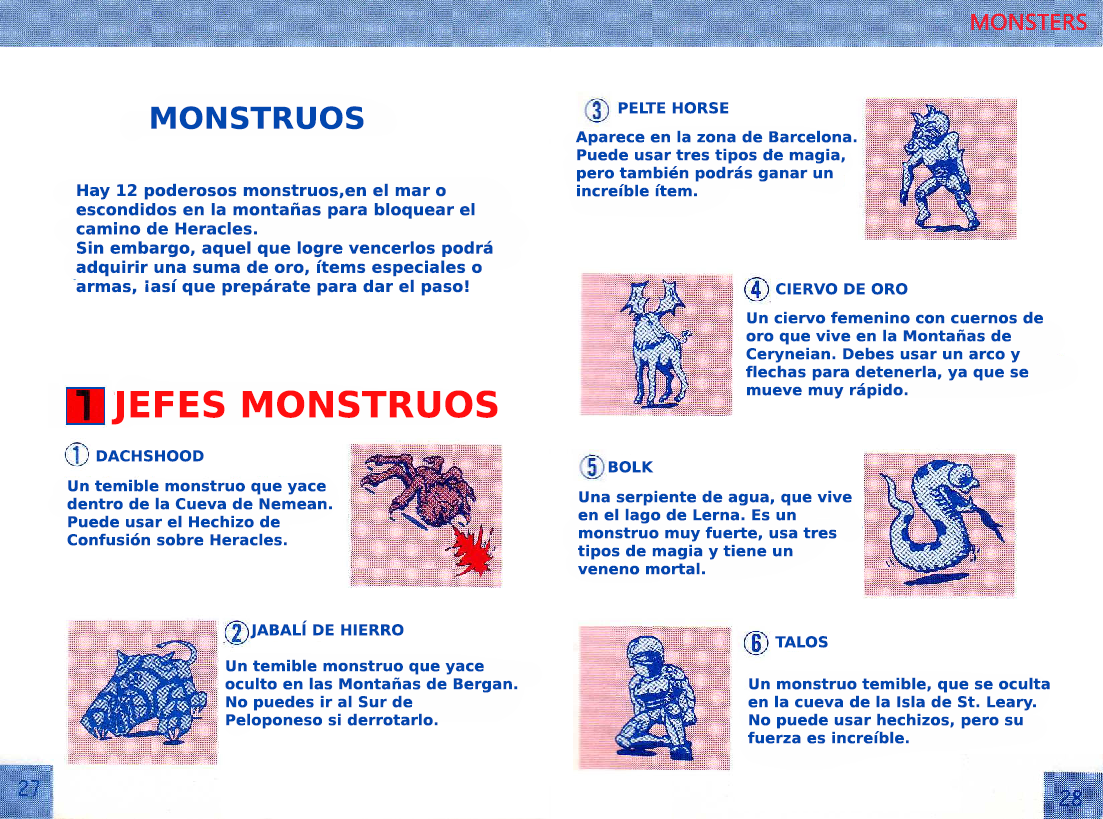
<style>
.page{position:relative;width:1103px;height:819px;background:#ffffff}
.page>*{position:absolute;margin:0}
.t1{font:15px "PrimaSansBT-Bold";color:#0247af}
.t2{font:30px "PrimaSansBT-Bold";color:#0247af}
.t3{font:16px "PrimaSansBT-Bold";color:#0247af}
.t4{font:36px "PrimaSansBT-Bold";color:#ff0e0f}
</style>
<div class="page">
<p class="t1" style="left:618px;top:102px;width:111px;height:12px">PELTE HORSE</p>
<p class="t2" style="left:151px;top:106px;width:213px;height:24px">MONSTRUOS</p>
<p class="t1" style="left:575px;top:130px;width:282px;height:67px">Aparece en la zona de Barcelona.<br>Puede usar tres tipos de magia,<br>pero también podrás ganar un<br>increíble ítem.</p>
<p class="t3" style="left:76px;top:183px;width:417px;height:113px">Hay 12 poderosos monstruos,en el mar o escondidos en la montañas para bloquear el<br>camino de Heracles.<br>Sin embargo, aquel que logre vencerlos podrá<br>adquirir una suma de oro, ítems especiales o armas, ¡así que prepárate para dar el paso!</p>
<p class="t1" style="left:776px;top:283px;width:132px;height:12px">CIERVO DE ORO</p>
<p class="t1" style="left:746px;top:311px;width:297px;height:88px">Un ciervo femenino con cuernos de<br>oro que vive en la Montañas de<br>Ceryneian. Debes usar un arco y <br>flechas para detenerla, ya que se mueve muy rápido.</p>
<p class="t4" style="left:111px;top:390px;width:387px;height:35px">JEFES MONSTRUOS</p>
<p class="t1" style="left:96px;top:450px;width:108px;height:12px">DACHSHOOD</p>
<p class="t1" style="left:608px;top:461px;width:46px;height:12px">BOLK</p>
<p class="t1" style="left:67px;top:479px;width:265px;height:67px">Un temible monstruo que yace<br>dentro de la Cueva de Nemean.<br>Puede usar el Hechizo de<br>Confusión sobre Heracles.</p>
<p class="t1" style="left:578px;top:490px;width:274px;height:85px">Una serpiente de agua, que vive <br>en el lago de Lerna. Es un <br>monstruo muy fuerte, usa tres <br>tipos de magia y tiene un <br>veneno mortal.</p>
<p class="t1" style="left:250px;top:620px;width:154px;height:19px">JABALÍ DE HIERRO</p>
<p class="t1" style="left:775px;top:636px;width:53px;height:12px">TALOS</p>
<p class="t1" style="left:225px;top:659px;width:293px;height:70px">Un temible monstruo que yace <br>oculto en las Montañas de Bergan. <br>No puedes ir al Sur de <br>Peloponeso si derrotarlo.</p>
<p class="t1" style="left:748px;top:677px;width:302px;height:67px">Un monstruo temible, que se oculta<br>en la cueva de la Isla de St. Leary.<br>No puede usar hechizos, pero su <br>fuerza es increíble.</p>
</div>
